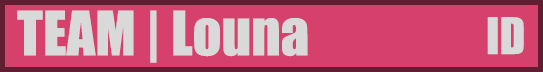
<style>
.page{position:relative;width:543px;height:72px;background:#d6406d}
.page>*{position:absolute;margin:0}
.t1{font:97px "Impact";color:#d9d9d9}
.t2{font:80px "Impact";color:#d9d9d9}
</style>
<div class="page">
<p class="t1" style="left:17px;top:10px;width:291px;height:53px">TEAM | Louna</p>
<p class="t2" style="left:487px;top:17px;width:37px;height:38px">ID</p>
</div>
